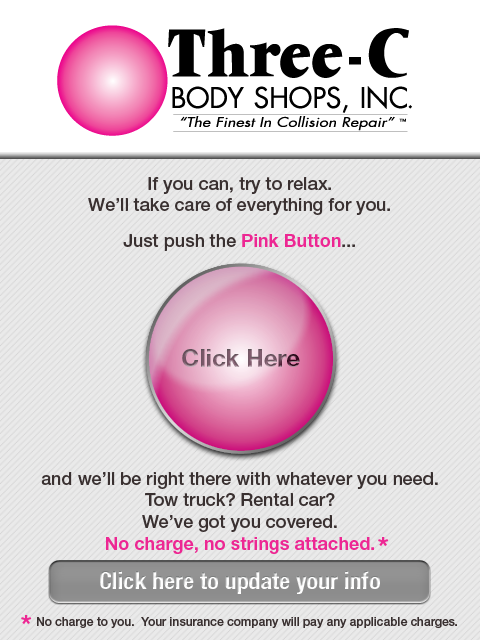
<style>
.page{position:relative;width:480px;height:640px;background:#eaeaea}
.page>*{position:absolute;margin:0}
.t1{font:18px "HelveticaNeueLTStd-Md";color:#393030}
.t2{font:18px "HelveticaNeueLTStd-Bd";color:#ed2793}
.t3{font:24px "HelveticaNeueLTStd-Bd"}
.t4{font:23.7px "HelveticaNeueLTStd-Bd"}
.t5{font:28px "HelveticaNeueLTStd-Bd";color:#ed2793}
.t6{font:24px "HelveticaNeueLTStd-BdCn"}
.t7{font:12px "HelveticaNeueLTStd-Md";color:#393030}
</style>
<div class="page">
<p class="t1" style="left:88px;top:177px;width:302px;height:74px;text-align:center">If you can, try to relax.<br>We’ll take care of everything for you.<br> <br>Just push the <span class="t2">Pink Button</span>...</p>
<p class="t3" style="left:182px;top:349px;width:118px;height:18px">Click Here</p>
<p class="t4" style="left:183px;top:350px;width:116px;height:17px">Click Here</p>
<p class="t1" style="left:41px;top:472px;width:397px;height:82px;text-align:center">and we’ll be right there with whatever you need.<br>Tow truck? Rental car?<br>We’ve got you covered.<br><span class="t2">No charge, no strings attached.</span></p>
<p class="t5" style="left:378px;top:537px;width:11px;height:10px">*</p>
<p class="t6" style="left:100px;top:571px;width:280px;height:23px">Click here to update your info</p>
<p class="t5" style="left:21px;top:615px;width:11px;height:10px">*</p>
<p class="t7" style="left:37px;top:617px;width:420px;height:11px">No charge to you.  Your insurance company will pay any applicable charges.</p>
</div>
